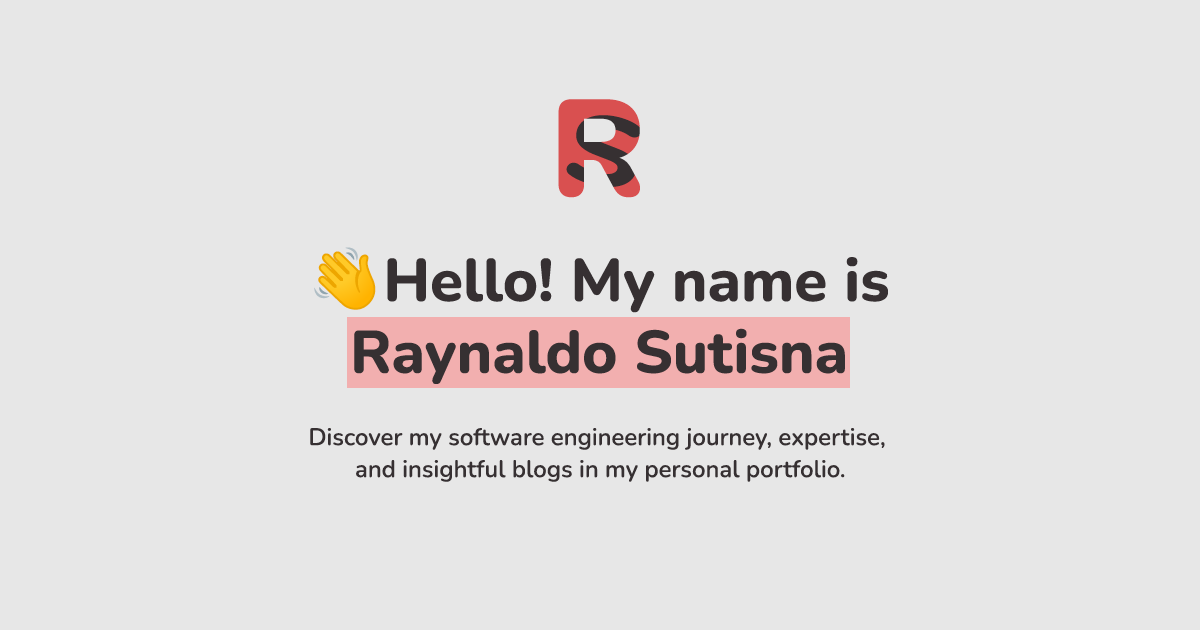
<style>
.page{position:relative;width:1200px;height:630px;background:#e7e7e7}
.page>*{position:absolute;margin:0}
.t1{font:136.8px "NunitoExtraLight-Black";color:#d95050}
.t2{font:98.4px "NunitoExtraLight-ExtraBold";color:#363032;scale:1.22 1}
.t3{font:59.8px "NunitoExtraLight-ExtraBold";color:#363032}
.t4{font:59.8px "NotoColorEmoji-SVG";color:#363032}
.t5{font:24px/32px "NunitoExtraLight-SemiBold";color:#363032}
</style>
<div class="page">
<p class="t1" style="left:558px;top:99px;width:82px;height:99px">R</p>
<p class="t2" style="left:566px;top:115px;width:76px;height:72px;rotate:11deg">S</p>
<p class="t3" style="left:314px;top:247px;width:574px;height:137px;text-align:center"><span class="t4">👋</span>Hello! My name is<br>Raynaldo Sutisna</p>
<p class="t5" style="left:310px;top:428px;width:575px;height:54px;text-align:center">Discover my software engineering journey, expertise, <br>and insightful blogs in my personal portfolio.</p>
</div>
